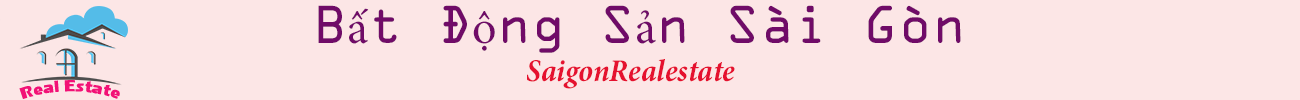
<style>
.page{position:relative;width:1300px;height:100px;background:#fce6e6}
.page>*{position:absolute;margin:0}
.t1{font:48px "OCRAStd";color:#700b68}
.t2{font:48px "MinionPro-Regular";color:#700b68}
.t3{font:32px "MinionPro-BoldCnIt";color:#e5112f}
</style>
<div class="page">
<p class="t1" style="left:318px;top:5px;width:643px;height:48px">B<span class="t2">ấ</span>t Đ<span class="t2">ộ</span>ng S<span class="t2">ả</span>n Sài Gòn</p>
<p class="t3" style="left:527px;top:59px;width:208px;height:30px">SaigonRealestate</p>
</div>
